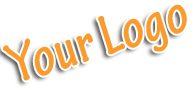
<style>
.page{position:relative;width:196px;height:90px;background:#ffffff}
.page>*{position:absolute;margin:0}
.t1{font:60px "TektonPro-BoldCond";color:#f99b2d}
</style>
<div class="page">
<p class="t1" style="left:3px;top:4px;width:184px;height:77px;rotate:-18deg">Your Logo</p>
</div>
